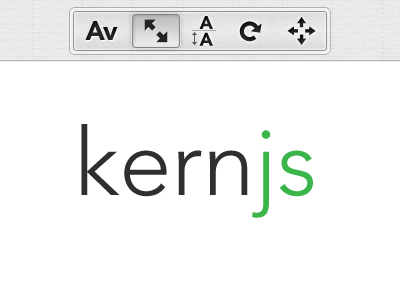
<style>
.page{position:relative;width:400px;height:300px;background:#ffffff}
.page>*{position:absolute;margin:0}
.t1{font:18.3px/16.8px "AvenirLTStd-Black";color:#1b1b1b}
.t2{font:26.2px "AvenirLTStd-Black";color:#333333}
.t3{font:93.9px "AvenirLTStd-Light";color:#2f2f2f}
.t4{font:93.9px "AvenirLTStd-Light";color:#39b54a}
</style>
<div class="page">
<p class="t1" style="left:199px;top:16px;width:14px;height:30px">A<br>A</p>
<p class="t2" style="left:85px;top:21px;width:33px;height:19px">Av</p>
<p class="t3" style="left:81px;top:124px;width:232px;height:94px">kern<span class="t4">js</span></p>
</div>
